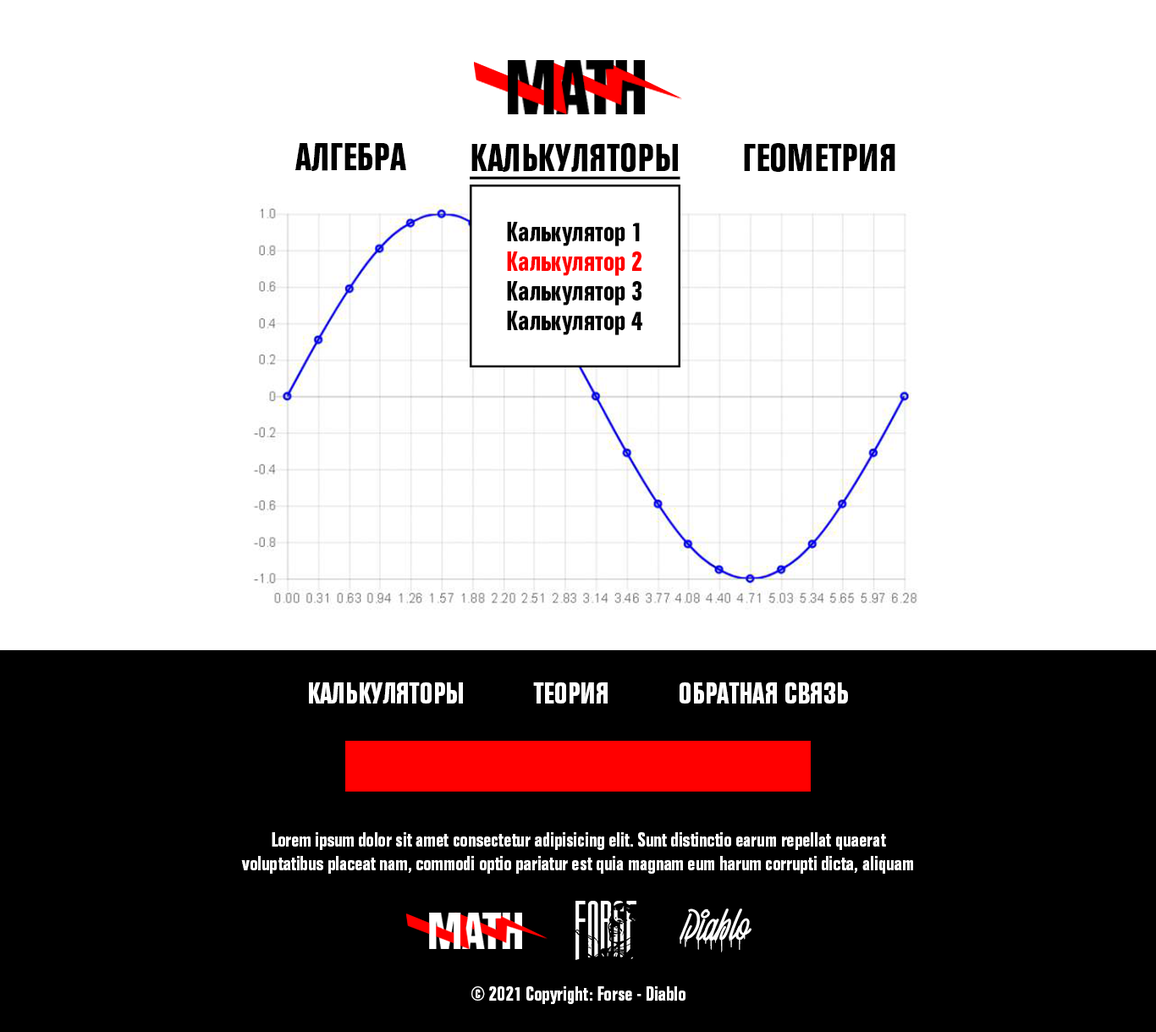
<style>
.page{position:relative;width:1156px;height:1032px;background:#ffffff}
.page>*{position:absolute;margin:0}
.t1{font:40.6px "FolioCon-Bol";color:#000000}
.t2{font:40.6px "FolioCon-Bol";color:#000000;text-decoration:underline}
.t3{font:27.9px "FolioCon-Bol";color:#000000}
.t4{font:27.9px "FolioCon-Bol";color:#fe0000}
.t5{font:30.3px "FolioCon-Bol";color:#ffffff}
.t6{font:20.3px "FolioCon-Bol";color:#ffffff}
.t7{font:50.8px "SquizersMarkerDemo";color:#ffffff}
</style>
<div class="page">
<p class="t1" style="left:295px;top:143px;width:111px;height:28px">АЛГЕБРА</p>
<p class="t2" style="left:470px;top:143px;width:210px;height:36px">КАЛЬКУЛЯТОРЫ</p>
<p class="t1" style="left:744px;top:143px;width:151px;height:29px">ГЕОМЕТРИЯ</p>
<p class="t3" style="left:507px;top:222px;width:133px;height:24px">Калькулятор 1</p>
<p class="t4" style="left:507px;top:251px;width:134px;height:25px">Калькулятор 2</p>
<p class="t3" style="left:507px;top:281px;width:134px;height:24px">Калькулятор 3</p>
<p class="t3" style="left:507px;top:311px;width:135px;height:24px">Калькулятор 4</p>
<p class="t5" style="left:309px;top:682px;width:154px;height:21px">КАЛЬКУЛЯТОРЫ</p>
<p class="t5" style="left:533px;top:682px;width:75px;height:21px">ТЕОРИЯ</p>
<p class="t5" style="left:680px;top:682px;width:168px;height:21px">ОБРАТНАЯ СВЯЗЬ</p>
<p class="t6" style="left:241px;top:832px;width:672px;height:41px;text-align:center">Lorem ipsum dolor sit amet consectetur adipisicing elit. Sunt distinctio earum repellat quaerat voluptatibus placeat nam, commodi optio pariatur est quia magnam eum harum corrupti dicta, aliquam sequi voluptate quas.</p>
<p class="t7" style="left:680px;top:908px;width:71px;height:44px">Diablo</p>
<p class="t6" style="left:471px;top:986px;width:214px;height:18px">© 2021 Copyright: Forse - Diablo</p>
</div>
